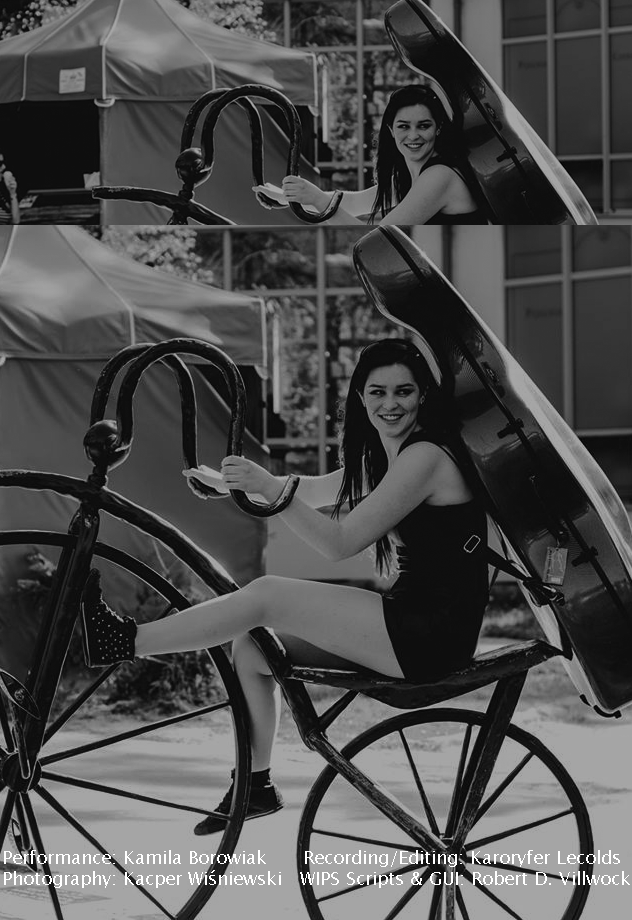
<style>
.page{position:relative;width:632px;height:920px}
.page>*{position:absolute;margin:0}
.t1{font:18px "LucidaSansUnicode";color:#ffffff}
</style>
<div class="page">
<p class="t1" style="left:4px;top:850px;width:626px;height:38px">Performance: Kamila Borowiak      Recording/Editing: Karoryfer Lecolds<br>Photography: Kacper Wiśniewski   WIPS Scripts &amp; GUI: Robert D. Villwock</p>
</div>
